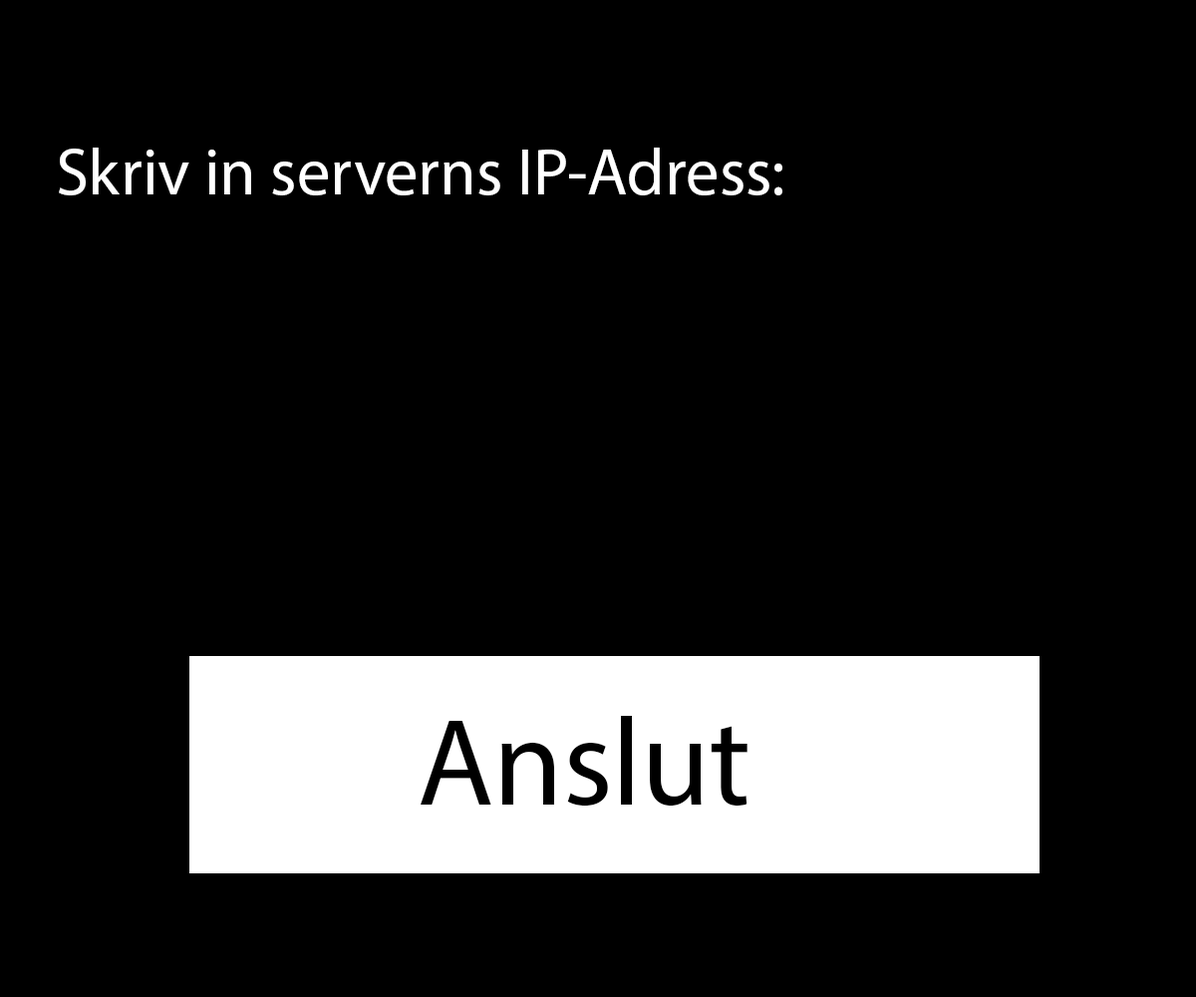
<style>
.page{position:relative;width:1196px;height:997px;background:#000000}
.page>*{position:absolute;margin:0}
.t1{font:66.5px "MyriadPro-Regular";color:#ffffff}
.t2{font:124.6px "MyriadPro-Regular";color:#000000}
</style>
<div class="page">
<p class="t1" style="left:59px;top:148px;width:724px;height:47px">Skriv in serverns IP-Adress:</p>
<p class="t2" style="left:421px;top:716px;width:327px;height:90px">Anslut</p>
</div>
